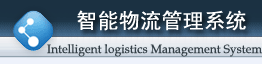
<style>
.page{position:relative;width:262px;height:64px}
.page>*{position:absolute;margin:0}
.t1{font:21.3px "SimHei";color:#ffffff}
.t2{font:12px "BookAntiqua";color:#354047}
</style>
<div class="page">
<p class="t1" style="left:77px;top:10px;width:169px;height:21px">智能物流管理系统</p>
<p class="t2" style="left:47px;top:44px;width:215px;height:13px">Intelligent logistics Management System</p>
</div>
